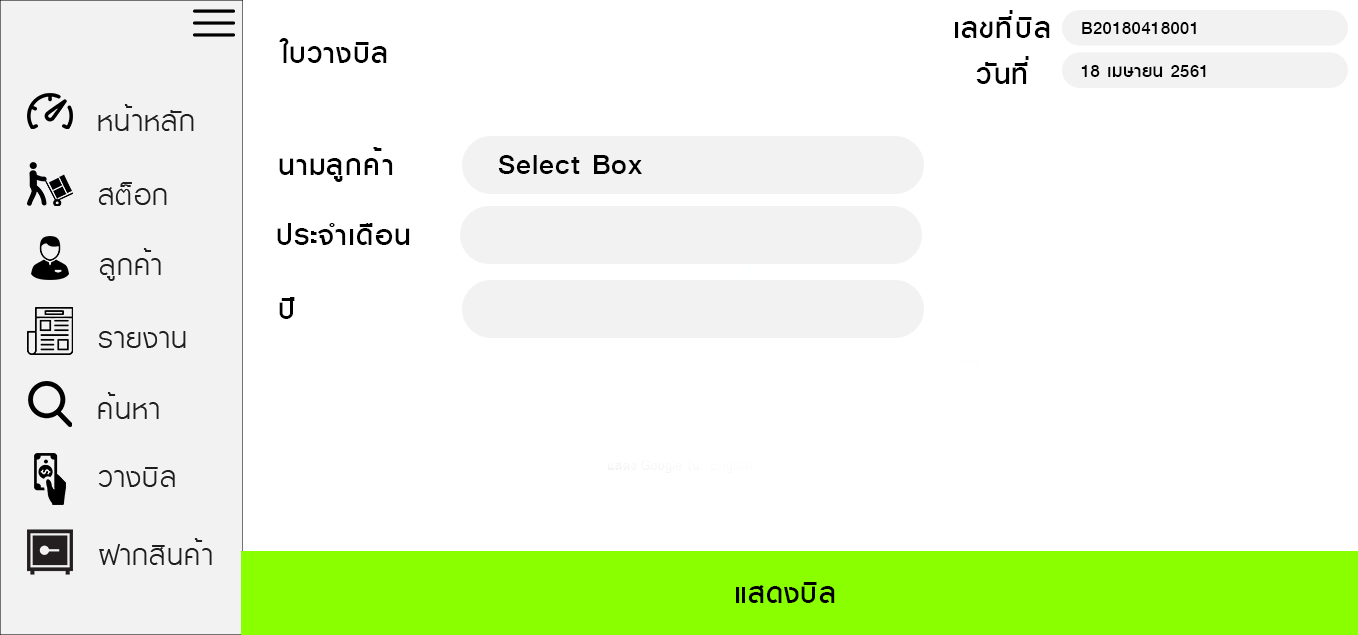
<style>
.page{position:relative;width:1358px;height:635px;background:#ffffff}
.page>*{position:absolute;margin:0}
.t1{font:40px "KittithadaMedium65P";letter-spacing:0.025em;color:#000000}
.t2{font:24.6px "KittithadaMedium65P";letter-spacing:0.025em;color:#000000}
</style>
<div class="page">
<p class="t1" style="left:955px;top:10px;width:95px;height:28px">เลขที่บิล</p>
<p class="t2" style="left:1082px;top:22px;width:114px;height:12px">B20180418001</p>
<p class="t1" style="left:279px;top:38px;width:108px;height:25px">ใบวางบิล</p>
<p class="t1" style="left:976px;top:56px;width:53px;height:28px">วันที่</p>
<p class="t2" style="left:1081px;top:65px;width:125px;height:12px">18 เมษายน 2561</p>
<p class="t1" style="left:279px;top:147px;width:114px;height:35px">นามลูกค้า</p>
<p class="t1" style="left:498px;top:155px;width:144px;height:19px">Select Box</p>
<p class="t1" style="left:277px;top:223px;width:133px;height:22px">ประจำเดือน</p>
<p class="t1" style="left:279px;top:297px;width:16px;height:22px">ปี</p>
<p class="t1" style="left:736px;top:582px;width:99px;height:21px">แสดงบิล</p>
</div>
